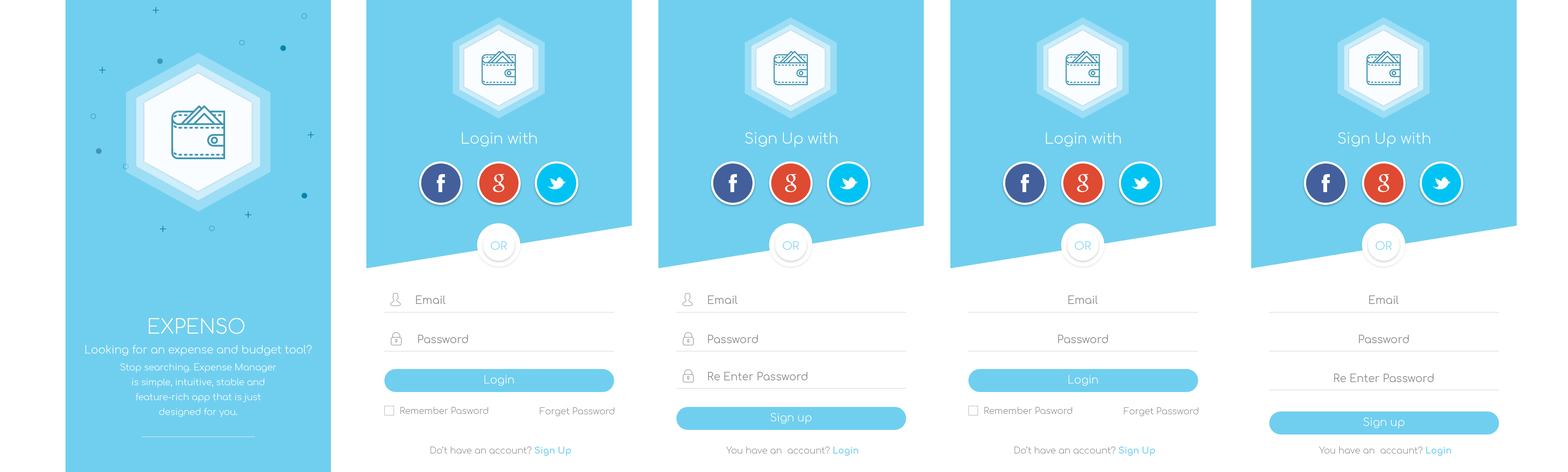
<style>
.page{position:relative;width:1568px;height:472px;background:#70cfef}
.page>*{position:absolute;margin:0}
.t1{font:12px "MyriadPro-Regular";color:#0b83ac}
.t2{font:14.5px "Comfortaa-Light";color:#ffffff}
.t3{font:11px "Comfortaa-Light";color:#70cfef}
.t4{font:10.6px "Comfortaa-Regular";color:#8d8b8b}
.t5{font:19.5px "Comfortaa-Light";color:#ffffff}
.t6{font:10.6px "Comfortaa-Light";color:#ffffff}
.t7{font:8.8px/14.9px "Comfortaa-Light";color:#ffffff}
.t8{font:8.8px "Comfortaa-Light";color:#8d8b8b}
.t9{font:8.8px "Comfortaa-Bold";color:#70cfef}
</style>
<div class="page">
<p class="t1" style="left:153px;top:7px;width:6px;height:6px">+</p>
<p class="t1" style="left:99px;top:67px;width:6px;height:6px">+</p>
<p class="t1" style="left:308px;top:132px;width:6px;height:6px">+</p>
<p class="t2" style="left:462px;top:132px;width:75px;height:15px">Login with</p>
<p class="t2" style="left:745px;top:132px;width:92px;height:15px">Sign Up with</p>
<p class="t2" style="left:1046px;top:132px;width:75px;height:15px">Login with</p>
<p class="t2" style="left:1338px;top:132px;width:92px;height:15px">Sign Up with</p>
<p class="t1" style="left:245px;top:212px;width:6px;height:6px">+</p>
<p class="t1" style="left:160px;top:226px;width:6px;height:6px">+</p>
<p class="t3" style="left:491px;top:241px;width:16px;height:9px">OR</p>
<p class="t3" style="left:783px;top:241px;width:16px;height:9px">OR</p>
<p class="t3" style="left:1075px;top:241px;width:16px;height:9px">OR</p>
<p class="t3" style="left:1375px;top:241px;width:17px;height:9px">OR</p>
<p class="t4" style="left:416px;top:296px;width:30px;height:8px">Email</p>
<p class="t4" style="left:708px;top:296px;width:30px;height:8px">Email</p>
<p class="t4" style="left:1068px;top:296px;width:30px;height:8px">Email</p>
<p class="t4" style="left:1369px;top:296px;width:30px;height:8px">Email</p>
<p class="t5" style="left:149px;top:318px;width:96px;height:16px">EXPENSO</p>
<p class="t4" style="left:418px;top:335px;width:50px;height:8px">Password</p>
<p class="t4" style="left:708px;top:335px;width:50px;height:8px">Password</p>
<p class="t4" style="left:1058px;top:335px;width:50px;height:8px">Password</p>
<p class="t4" style="left:1359px;top:335px;width:50px;height:8px">Password</p>
<p class="t6" style="left:85px;top:345px;width:227px;height:11px">Looking for an expense and budget tool?</p>
<p class="t7" style="left:120px;top:364px;width:156px;height:53px;text-align:center">Stop searching. Expense Manager is simple, intuitive, stable and feature-rich app that is just designed for you.</p>
<p class="t6" style="left:484px;top:375px;width:30px;height:11px">Login</p>
<p class="t4" style="left:708px;top:372px;width:99px;height:8px">Re Enter Password</p>
<p class="t6" style="left:1068px;top:375px;width:30px;height:11px">Login</p>
<p class="t4" style="left:1334px;top:374px;width:99px;height:8px">Re Enter Password</p>
<p class="t8" style="left:400px;top:407px;width:88px;height:7px">Remember Pasword</p>
<p class="t8" style="left:540px;top:407px;width:74px;height:10px">Forget Password</p>
<p class="t6" style="left:771px;top:413px;width:41px;height:11px">Sign up</p>
<p class="t8" style="left:984px;top:407px;width:88px;height:7px">Remember Pasword</p>
<p class="t8" style="left:1124px;top:407px;width:74px;height:10px">Forget Password</p>
<p class="t6" style="left:1363px;top:418px;width:41px;height:11px">Sign up</p>
<p class="t8" style="left:430px;top:447px;width:141px;height:9px">Do’t have an account? <span class="t9">Sign Up</span></p>
<p class="t8" style="left:726px;top:447px;width:132px;height:9px">You have an  account? <span class="t9">Login</span></p>
<p class="t8" style="left:1014px;top:447px;width:141px;height:9px">Do’t have an account? <span class="t9">Sign Up</span></p>
<p class="t8" style="left:1319px;top:447px;width:132px;height:9px">You have an  account? <span class="t9">Login</span></p>
</div>
